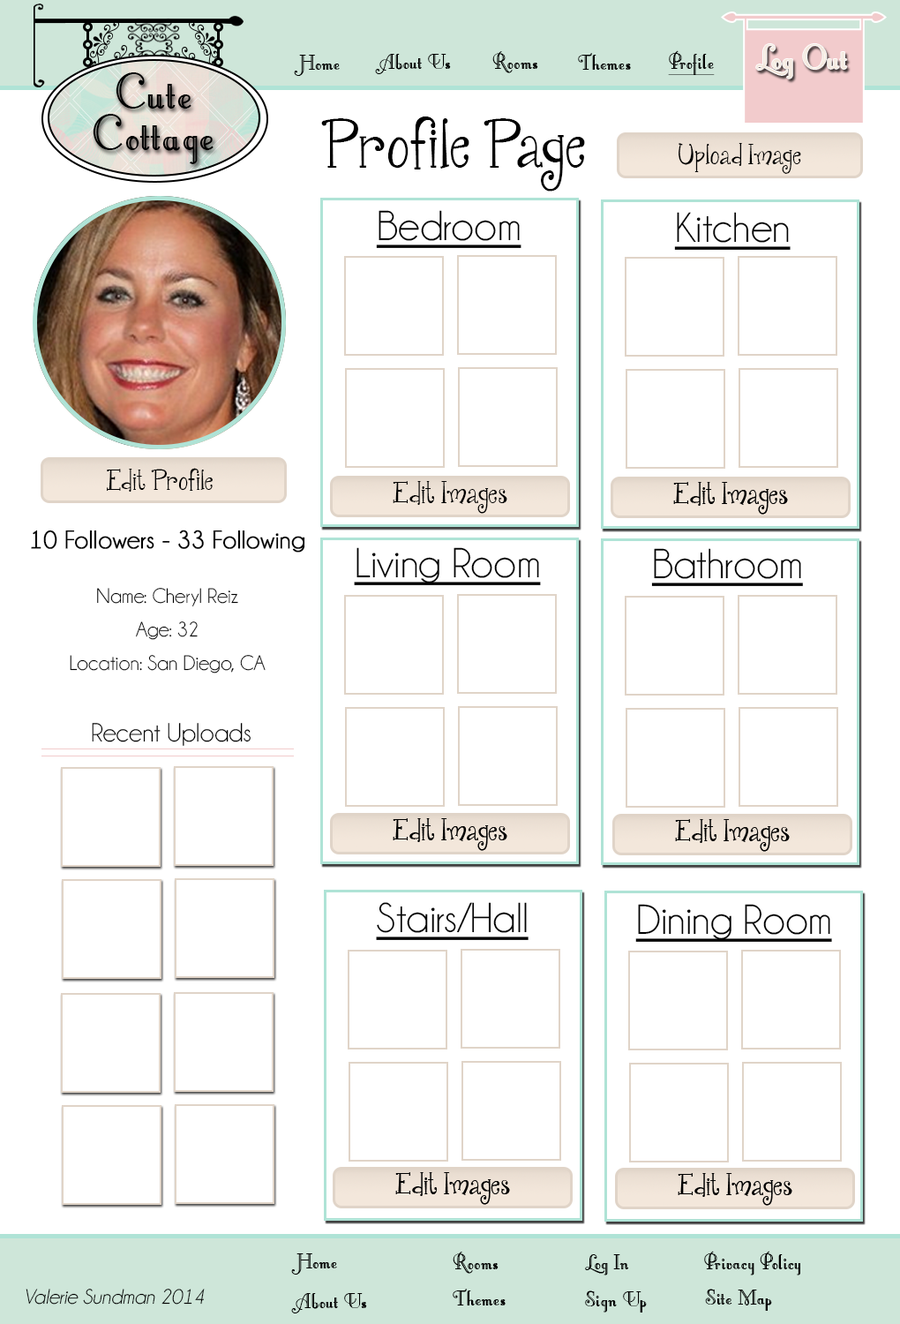
<style>
.page{position:relative;width:900px;height:1324px;background:#ffffff}
.page>*{position:absolute;margin:0}
.t1{font:26.5px "LittleLordFontleroyNF";color:#000000}
.t2{font:26.5px "LittleLordFontleroyNF";color:#000000;text-decoration:underline}
.t3{font:42.4px "LittleLordFontleroyNF";color:#f3e7db}
.t4{font:62.5px/20.8px "LittleLordFontleroyNF";color:#000000}
.t5{font:63.6px "JandaQuirkygirl";color:#000000}
.t6{font:26.5px "JandaQuirkygirl";color:#000000}
.t7{font:42.4px "Champagne&Limousines";color:#000000;text-decoration:underline}
.t8{font:28.3px "JandaQuirkygirl";color:#000000}
.t9{font:21.2px/16.8px "Champagne&Limousines";color:#000000}
.t10{font:25.6px/21.2px "Champagne&Limousines";color:#000000;font-weight:bold}
.t11{font:26.5px "Champagne&Limousines";color:#000000}
.t12{font:21.2px "Champagne&Limousines-Italic";color:#000000}
</style>
<div class="page">
<p class="t1" style="left:375px;top:54px;width:76px;height:20px">About Us</p>
<p class="t1" style="left:493px;top:51px;width:46px;height:22px">Rooms</p>
<p class="t1" style="left:578px;top:53px;width:53px;height:17px">Themes</p>
<p class="t2" style="left:668px;top:50px;width:47px;height:25px">Profile</p>
<p class="t3" style="left:757px;top:44px;width:91px;height:35px">Log Out</p>
<p class="t1" style="left:294px;top:55px;width:46px;height:21px">Home</p>
<p class="t4" style="left:93px;top:72px;width:121px;height:92px;text-align:center">Cute <br><br>Cottage</p>
<p class="t5" style="left:321px;top:117px;width:264px;height:75px">Profile Page</p>
<p class="t6" style="left:679px;top:143px;width:123px;height:31px">Upload Image</p>
<p class="t7" style="left:376px;top:210px;width:146px;height:38px">Bedroom</p>
<p class="t7" style="left:674px;top:212px;width:117px;height:38px">Kitchen</p>
<p class="t6" style="left:107px;top:468px;width:106px;height:24px">Edit Profile</p>
<p class="t8" style="left:393px;top:481px;width:115px;height:33px">Edit Images</p>
<p class="t9" style="left:31px;top:530px;width:274px;height:144px;text-align:center"><span class="t10">10 Followers - 33 Following<br><br></span><br>Name: Cheryl Reiz<br><br>Age: 32<br><br>Location: San Diego, CA</p>
<p class="t7" style="left:354px;top:547px;width:187px;height:38px">Living Room</p>
<p class="t7" style="left:652px;top:548px;width:151px;height:38px">Bathroom</p>
<p class="t11" style="left:92px;top:723px;width:159px;height:23px">Recent Uploads</p>
<p class="t7" style="left:376px;top:902px;width:153px;height:38px">Stairs/Hall</p>
<p class="t7" style="left:636px;top:904px;width:196px;height:38px">Dining Room</p>
<p class="t1" style="left:291px;top:1254px;width:46px;height:21px">Home</p>
<p class="t1" style="left:453px;top:1252px;width:46px;height:22px">Rooms</p>
<p class="t1" style="left:704px;top:1251px;width:97px;height:25px">Privacy Policy</p>
<p class="t1" style="left:585px;top:1254px;width:44px;height:22px">Log In</p>
<p class="t12" style="left:26px;top:1289px;width:179px;height:16px">Valerie Sundman 2014</p>
<p class="t1" style="left:453px;top:1289px;width:53px;height:17px">Themes</p>
<p class="t1" style="left:705px;top:1289px;width:67px;height:22px">Site Map</p>
<p class="t1" style="left:291px;top:1293px;width:76px;height:21px">About Us</p>
<p class="t1" style="left:585px;top:1291px;width:62px;height:22px">Sign Up</p>
</div>
